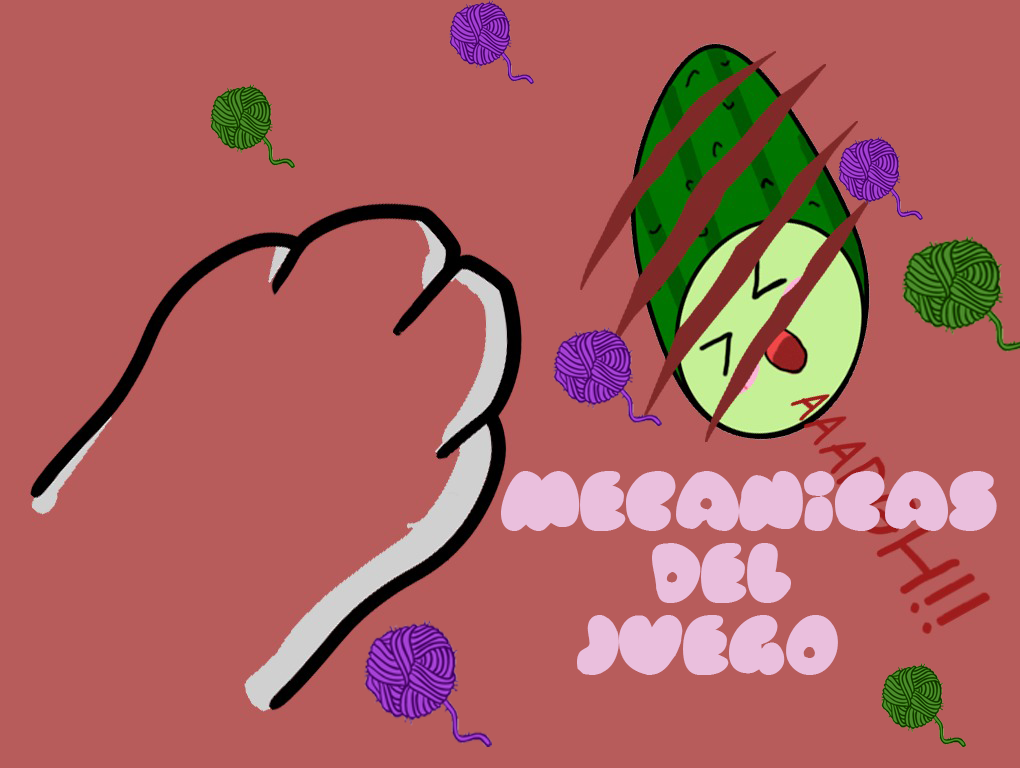
<style>
.page{position:relative;width:1020px;height:768px;background:#b75c5b}
.page>*{position:absolute;margin:0}
.t1{font:60px "Rubberneck";color:#eabfdd}
</style>
<div class="page">
<p class="t1" style="left:501px;top:471px;width:496px;height:204px">Mecanicas<br>    del <br>  juego</p>
</div>
